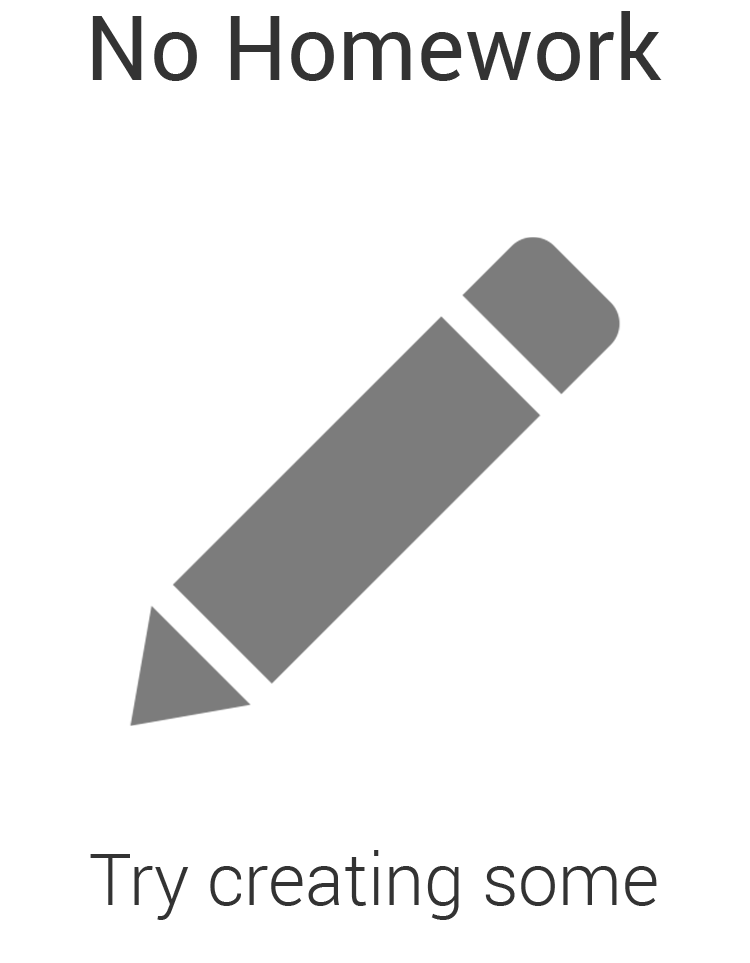
<style>
.page{position:relative;width:750px;height:963px;background:#ffffff}
.page>*{position:absolute;margin:0}
.t1{font:90px "Roboto-Regular";color:#333333}
.t2{font:72px "Roboto-Light";color:#333333}
</style>
<div class="page">
<p class="t1" style="left:92px;top:11px;width:570px;height:70px">No Homework</p>
<p class="t2" style="left:90px;top:850px;width:567px;height:70px">Try creating some</p>
</div>
